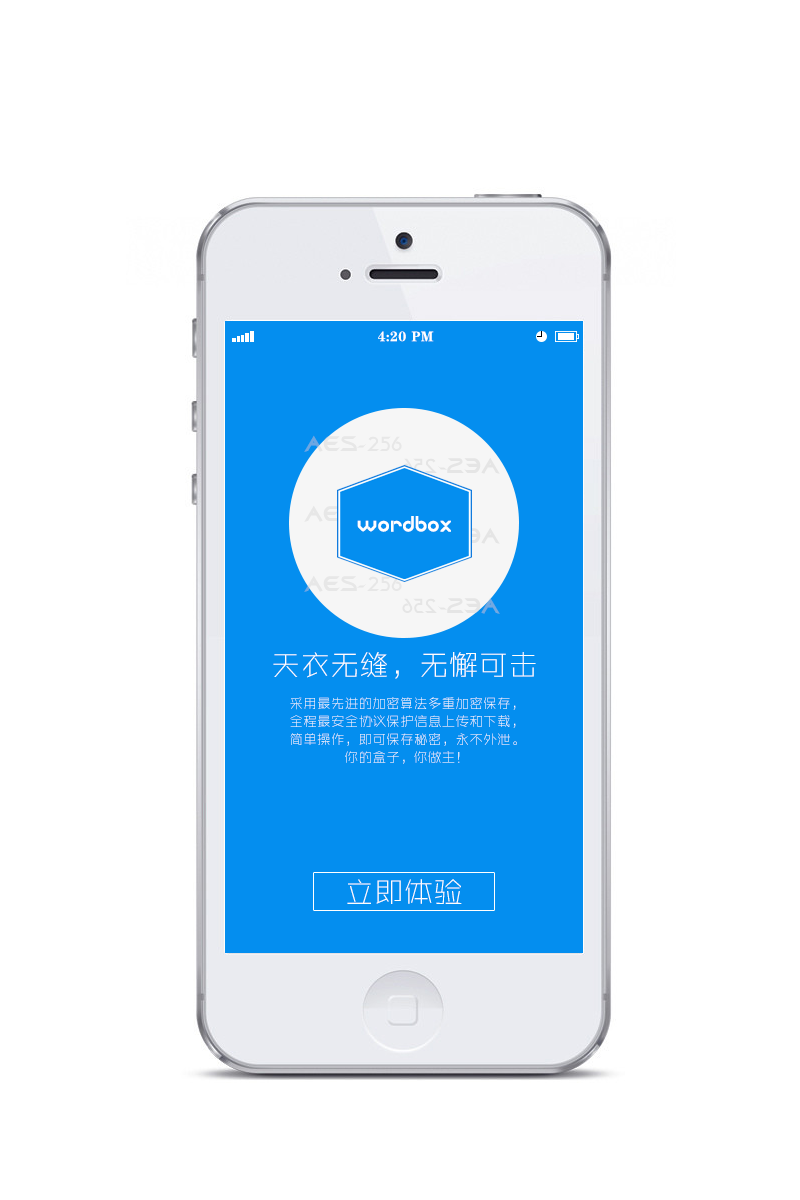
<style>
.page{position:relative;width:800px;height:1200px;background:#ffffff}
.page>*{position:absolute;margin:0}
.t1{font:14px "FZCSK--GBK1-0";letter-spacing:0.02em;color:#ffffff}
.t2{font:24px/14px "Bajoran";letter-spacing:0.02em;scale:0.97 1}
.t3{font:23.1px "BabyFace";color:#ffffff}
.t4{font:30px "ZHSRXT--GBK1-0";letter-spacing:0.02em;color:#fefefe;scale:0.97 1}
.t5{font:14px/18px "ZHSRXT--GBK1-0";letter-spacing:0.02em;color:#fefefe;scale:0.97 1}
</style>
<div class="page">
<p class="t1" style="left:378px;top:331px;width:28px;height:11px">4:20</p>
<p class="t1" style="left:411px;top:331px;width:23px;height:11px">PM</p>
<p class="t2" style="left:304px;top:435px;width:162px;height:157px">AES-256<br><br><br><br><br>AES-256   SHA<br><br><br><br><br>AES-256</p>
<p class="t2" style="left:338px;top:457px;width:162px;height:157px;rotate:180deg">AES-256<br><br><br><br><br>AES-256   SHA<br><br><br><br><br>AES-256</p>
<p class="t3" style="left:357px;top:516px;width:94px;height:16px">wordbox</p>
<p class="t4" style="left:273px;top:652px;width:263px;height:27px">天衣无缝，无懈可击</p>
<p class="t5" style="left:290px;top:697px;width:227px;height:67px;text-align:center">采用最先进的加密算法多重加密保存，<br>全程最安全协议保护信息上传和下载，<br>简单操作，即可保存秘密，永不外泄。<br>你的盒子，你做主！</p>
<p class="t4" style="left:347px;top:879px;width:115px;height:25px">立即体验</p>
</div>
